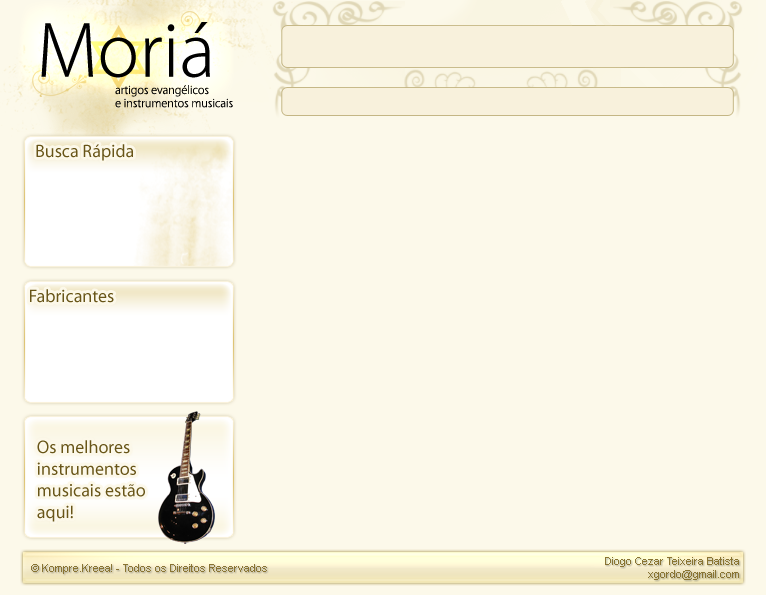
<style>
.page{position:relative;width:766px;height:595px;background:#fcf9ea}
.page>*{position:absolute;margin:0}
.t1{font:70.5px "KozGoPro-Light";color:#000000}
.t2{font:11px "KozGoPro-Light";color:#000000}
.t3{font:18px "MyriadPro-Regular";color:#685518}
.t4{font:11px "ArialMT";color:#897433}
</style>
<div class="page">
<p class="t1" style="left:41px;top:22px;width:169px;height:56px">Moriá</p>
<p class="t2" style="left:115px;top:85px;width:118px;height:23px">artigos evangélicos<br>e instrumentos musicais</p>
<p class="t3" style="left:36px;top:144px;width:97px;height:17px">Busca Rápida</p>
<p class="t3" style="left:30px;top:289px;width:84px;height:14px">Fabricantes</p>
<p class="t3" style="left:37px;top:440px;width:108px;height:82px">Os melhores instrumentos musicais estão aqui!</p>
<p class="t4" style="left:605px;top:557px;width:134px;height:23px;text-align:right">Diogo Cezar Teixeira Batista<br>xgordo@gmail.com</p>
<p class="t4" style="left:31px;top:564px;width:236px;height:10px">© Kompre.Kreea! - Todos os Direitos Reservados</p>
</div>
